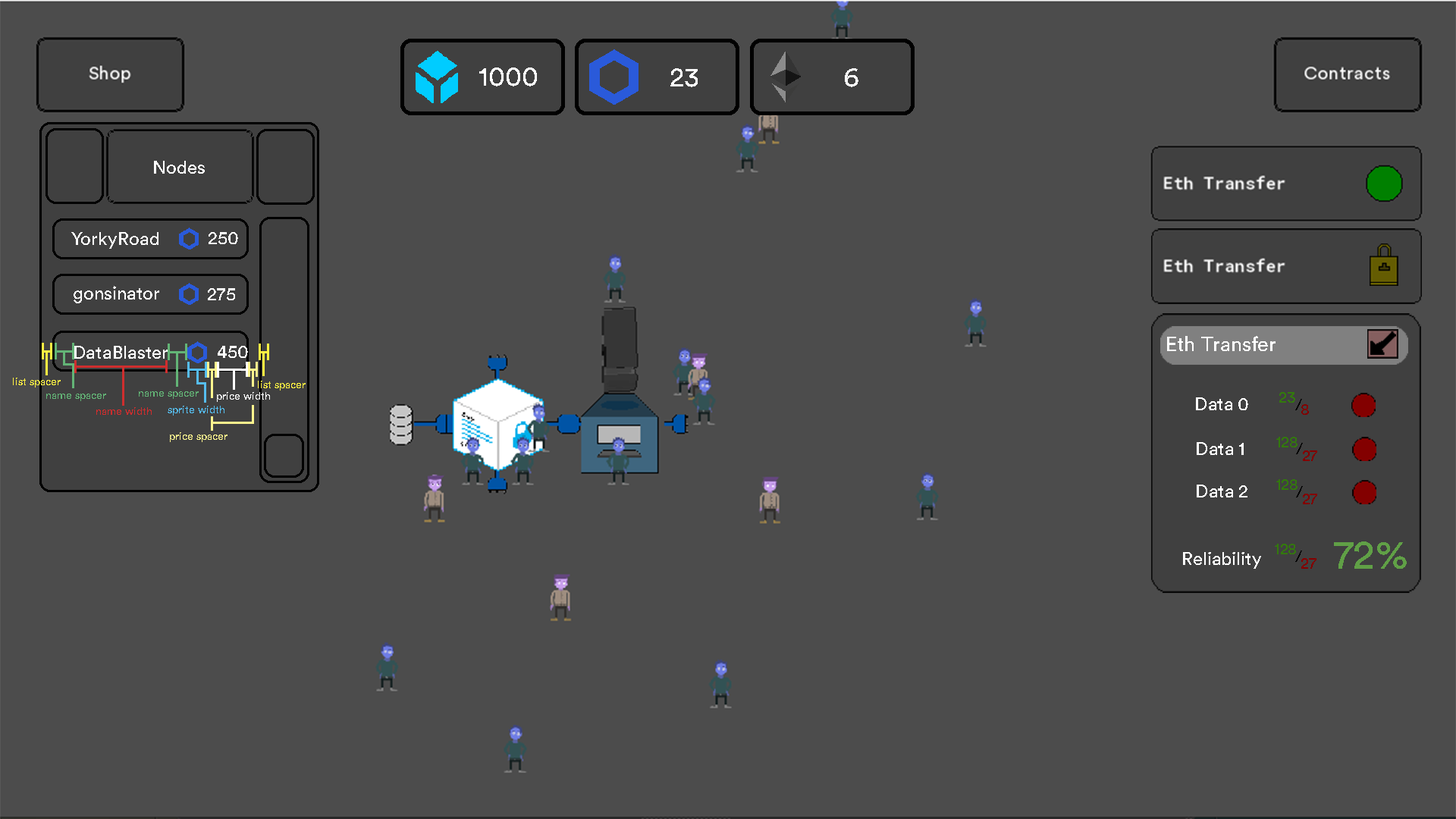
<style>
.page{position:relative;width:1456px;height:819px;background:#4c4c4c}
.page>*{position:absolute;margin:0}
.t1{font:27.3px "CircularStd-Book";color:#ffffff}
.t2{font:18.2px "CircularStd-Book";color:#ffffff}
.t3{font:20.4px "CircularStd-Book";color:#ffffff}
.t4{font:10.6px "CircularStd-Book";color:#fff142}
.t5{font:10.6px "CircularStd-Book";color:#63b476}
.t6{font:10.6px "CircularStd-Book";color:#ffffff}
.t7{font:18.1px "CircularStd-Book";color:#ffffff}
.t8{font:15.9px "CircularStd-Book";color:#33790d}
.t9{font:15.9px "CircularStd-Book";color:#000000}
.t10{font:10.6px "CircularStd-Book";color:#cf2e2e}
.t11{font:10.6px "CircularStd-Book";color:#56bdef}
.t12{font:15.9px "CircularStd-Book";color:#830000}
.t13{font:10.6px "CircularStd-Book";color:#fff58e}
.t14{font:40.8px "CircularStd-Book";color:#60a046}
</style>
<div class="page">
<p class="t1" style="left:479px;top:67px;width:58px;height:19px">1000</p>
<p class="t1" style="left:670px;top:68px;width:28px;height:19px">23</p>
<p class="t1" style="left:845px;top:68px;width:13px;height:19px">6</p>
<p class="t2" style="left:154px;top:161px;width:51px;height:13px">Nodes</p>
<p class="t2" style="left:71px;top:232px;width:87px;height:17px">YorkyRoad</p>
<p class="t2" style="left:209px;top:232px;width:29px;height:12px">250</p>
<p class="t2" style="left:74px;top:286px;width:85px;height:17px">gonsinator</p>
<p class="t2" style="left:208px;top:288px;width:27px;height:12px">275</p>
<p class="t3" style="left:1167px;top:336px;width:108px;height:15px">Eth Transfer</p>
<p class="t2" style="left:74px;top:346px;width:94px;height:13px">DataBlaster</p>
<p class="t2" style="left:218px;top:346px;width:30px;height:12px">450</p>
<p class="t4" style="left:13px;top:378px;width:48px;height:10px">list spacer</p>
<p class="t4" style="left:258px;top:381px;width:48px;height:10px">list spacer</p>
<p class="t5" style="left:46px;top:394px;width:60px;height:7px">name spacer</p>
<p class="t5" style="left:139px;top:391px;width:60px;height:8px">name spacer</p>
<p class="t6" style="left:217px;top:392px;width:53px;height:10px">price width</p>
<p class="t7" style="left:1196px;top:397px;width:52px;height:13px">Data 0</p>
<p class="t8" style="left:1279px;top:392px;width:16px;height:11px">23</p>
<p class="t9" style="left:1295px;top:399px;width:7px;height:11px">/</p>
<p class="t10" style="left:96px;top:407px;width:56px;height:8px">name width</p>
<p class="t11" style="left:168px;top:406px;width:56px;height:10px">sprite width</p>
<p class="t12" style="left:1301px;top:404px;width:8px;height:11px">8</p>
<p class="t13" style="left:170px;top:432px;width:57px;height:10px">price spacer</p>
<p class="t8" style="left:1276px;top:437px;width:21px;height:10px">128</p>
<p class="t7" style="left:1197px;top:442px;width:47px;height:13px">Data 1</p>
<p class="t9" style="left:1296px;top:443px;width:7px;height:11px">/</p>
<p class="t12" style="left:1303px;top:450px;width:14px;height:11px">27</p>
<p class="t7" style="left:1197px;top:485px;width:50px;height:12px">Data 2</p>
<p class="t8" style="left:1276px;top:479px;width:21px;height:11px">128</p>
<p class="t9" style="left:1296px;top:486px;width:7px;height:11px">/</p>
<p class="t12" style="left:1303px;top:494px;width:14px;height:10px">27</p>
<p class="t8" style="left:1275px;top:544px;width:21px;height:10px">128</p>
<p class="t14" style="left:1334px;top:541px;width:73px;height:28px">72%</p>
<p class="t7" style="left:1183px;top:552px;width:78px;height:17px">Reliability</p>
<p class="t9" style="left:1295px;top:551px;width:7px;height:11px">/</p>
<p class="t12" style="left:1301px;top:558px;width:15px;height:11px">27</p>
</div>
